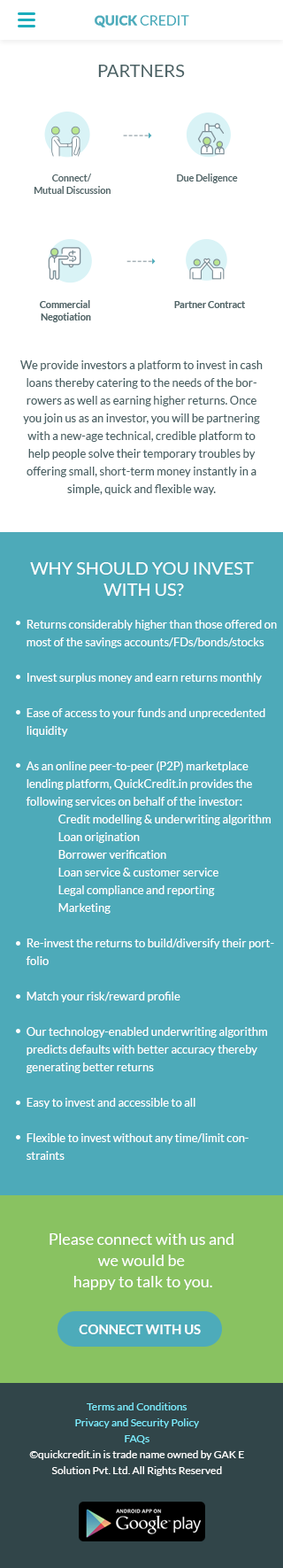
<style>
.page{position:relative;width:283px;height:1568px;background:#4daab9}
.page>*{position:absolute;margin:0}
.t1{font:17.7px "Lato-Regular";color:#4a6164;text-transform:uppercase}
.t2{font:9.4px/12.8px "Lato-Bold";color:#516568}
.t3{font:9.4px "Lato-Bold";color:#516568}
.t4{font:11.5px/17.7px "Lato-Regular";color:#4a6164}
.t5{font:17.7px "Lato-Regular";color:#ffffff;text-transform:uppercase}
.t6{font:11.5px/17.7px "Lato-Regular";color:#ffffff}
.t7{font:15.9px/21.2px "Lato-Regular";color:#ffffff}
.t8{font:13.3px "Lato-Bold";color:#ffffff;text-transform:uppercase}
.t9{font:10.6px/15.9px "Lato-Regular";color:#ffffff}
.t10{font:10.6px/15.9px "Lato-Regular";color:#7cebfc}
</style>
<div class="page">
<p class="t1" style="left:98px;top:65px;width:87px;height:12px">Partners</p>
<p class="t2" style="left:34px;top:174px;width:77px;height:20px;text-align:center">Connect/ <br>Mutual Discussion</p>
<p class="t3" style="left:177px;top:174px;width:61px;height:9px">Due Deligence</p>
<p class="t2" style="left:40px;top:300px;width:51px;height:22px;text-align:center">Commercial <br>Negotiation</p>
<p class="t3" style="left:174px;top:301px;width:71px;height:7px">Partner Contract</p>
<p class="t4" style="left:20px;top:360px;width:243px;height:135px;text-align:center">We provide investors a platform to invest in cash loans thereby catering to the needs of the borrowers as well as earning higher returns. Once you join us as an investor, you will be partnering with a new-age technical, credible platform to help people solve their temporary troubles by offering small, short-term money instantly in a simple, quick and flexible way.</p>
<p class="t5" style="left:30px;top:562px;width:224px;height:34px;text-align:center">Why should you invest <br>with us?</p>
<p class="t6" style="left:26px;top:620px;width:251px;height:540px">Returns considerably higher than those offered on most of the savings accounts/FDs/bonds/stocks<br><br>Invest surplus money and earn returns monthly<br><br>Ease of access to your funds and unprecedented liquidity<br><br>As an online peer-to-peer (P2P) marketplace lending platform, QuickCredit.in provides the following services on behalf of the investor:<br> Credit modelling &amp; underwriting algorithm<br> Loan origination<br> Borrower verification<br> Loan service &amp; customer service<br> Legal compliance and reporting<br> Marketing<br><br>Re-invest the returns to build/diversify their portfolio<br><br>Match your risk/reward profile<br><br>Our technology-enabled underwriting algorithm predicts defaults with better accuracy thereby generating better returns<br><br>Easy to invest and accessible to all<br><br>Flexible to invest without any time/limit constraints</p>
<p class="t7" style="left:50px;top:1233px;width:184px;height:57px;text-align:center">Please connect with us and <br>we would be <br>happy to talk to you.</p>
<p class="t8" style="left:79px;top:1325px;width:122px;height:9px">Connect with us</p>
<p class="t9" style="left:29px;top:1402px;width:215px;height:74px;text-align:center"><span class="t10">Terms and Conditions        <br>Privacy and Security Policy         <br>FAQs<br></span>©quickcredit.in is trade name owned by GAK E Solution Pvt. Ltd. All Rights Reserved</p>
</div>
